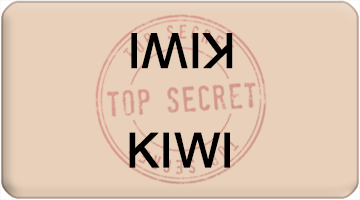
<style>
.page{position:relative;width:360px;height:200px;background:#e8d0bb}
.page>*{position:absolute;margin:0}
.t1{font:48px "ArialMT";color:#000000;font-weight:bold}
</style>
<div class="page">
<p class="t1" style="left:131px;top:33px;width:102px;height:36px;rotate:180deg">KIWI</p>
<p class="t1" style="left:129px;top:132px;width:101px;height:36px">KIWI</p>
</div>
